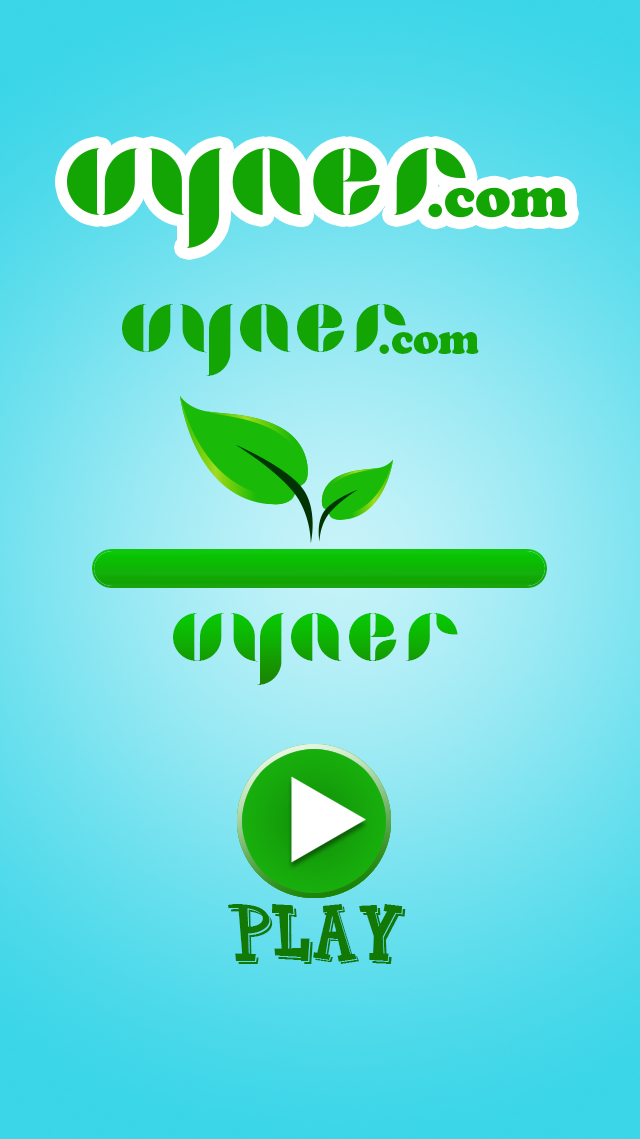
<style>
.page{position:relative;width:640px;height:1139px}
.page>*{position:absolute;margin:0}
.t1{font:80px "Lamia";color:#12a503}
.t2{font:40px "CooperBlackStd";color:#12a503}
.t3{font:80px "Lamia";color:#0db403}
.t4{font:60px "CornFed";color:#127904}
</style>
<div class="page">
<p class="t1" style="left:122px;top:304px;width:284px;height:72px">uyaer</p>
<p class="t2" style="left:379px;top:332px;width:100px;height:22px">.com</p>
<p class="t3" style="left:173px;top:613px;width:285px;height:72px">uyaer</p>
<p class="t4" style="left:228px;top:904px;width:178px;height:60px">play</p>
</div>
